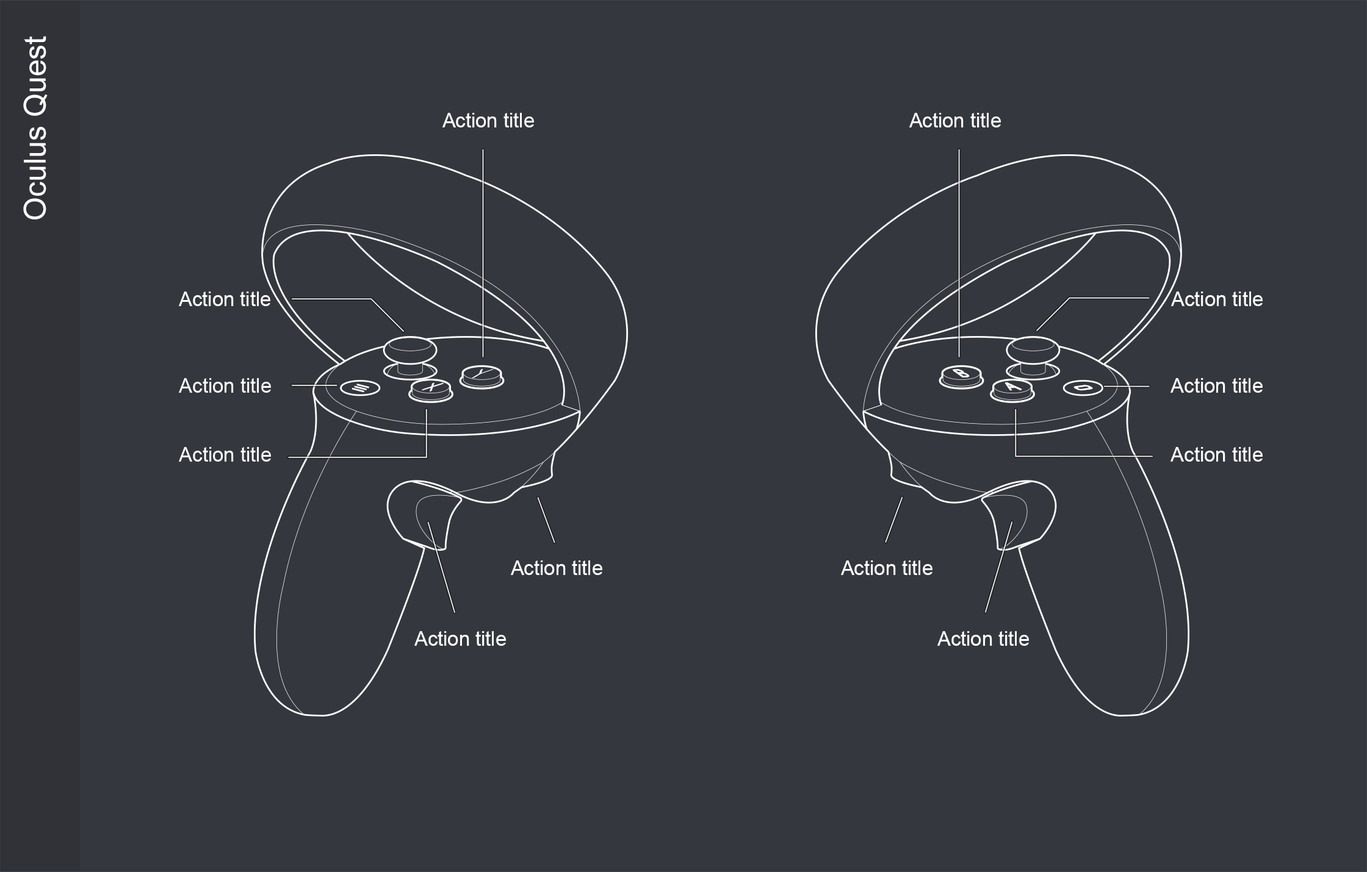
<style>
.page{position:relative;width:1367px;height:872px;background:#35373e}
.page>*{position:absolute;margin:0}
.t1{font:30.5px "ArialMT";color:#ffffff}
.t2{font:20px "ArialMT";color:#ffffff}
</style>
<div class="page">
<p class="t1" style="left:23px;top:36px;width:25px;height:184px;rotate:-90deg">Oculus Quest</p>
<p class="t2" style="left:442px;top:113px;width:92px;height:15px">Action title</p>
<p class="t2" style="left:909px;top:113px;width:92px;height:15px">Action title</p>
<p class="t2" style="left:179px;top:292px;width:91px;height:14px">Action title</p>
<p class="t2" style="left:1171px;top:292px;width:91px;height:14px">Action title</p>
<p class="t2" style="left:179px;top:378px;width:92px;height:15px">Action title</p>
<p class="t2" style="left:1170px;top:378px;width:92px;height:15px">Action title</p>
<p class="t2" style="left:179px;top:447px;width:92px;height:15px">Action title</p>
<p class="t2" style="left:1170px;top:447px;width:92px;height:15px">Action title</p>
<p class="t2" style="left:511px;top:561px;width:91px;height:14px">Action title</p>
<p class="t2" style="left:841px;top:561px;width:91px;height:14px">Action title</p>
<p class="t2" style="left:414px;top:631px;width:92px;height:15px">Action title</p>
<p class="t2" style="left:937px;top:631px;width:92px;height:15px">Action title</p>
</div>
